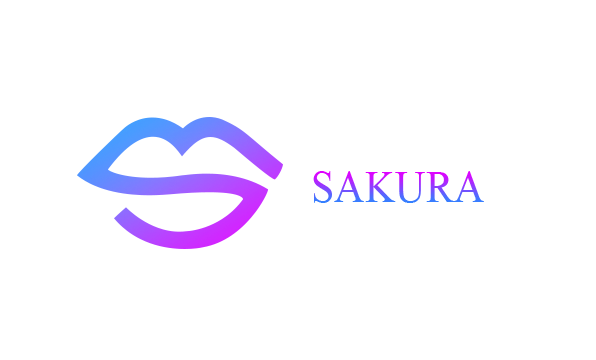
<style>
.page{position:relative;width:596px;height:360px;background:#ffffff}
.page>*{position:absolute;margin:0}
.t1{font:43.7px "TimesNewRomanPSMT";scale:0.96 1}
</style>
<div class="page">
<p class="t1" style="left:313px;top:171px;width:171px;height:32px">SAKURA</p>
</div>
